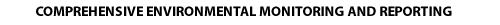
<style>
.page{position:relative;width:500px;height:25px;background:#ffffff}
.page>*{position:absolute;margin:0}
.t1{font:14px "Myriad-Bold";color:#000000;text-transform:uppercase}
</style>
<div class="page">
<p class="t1" style="left:36px;top:6px;width:416px;height:10px">Comprehensive Environmental Monitoring and Reporting</p>
</div>
